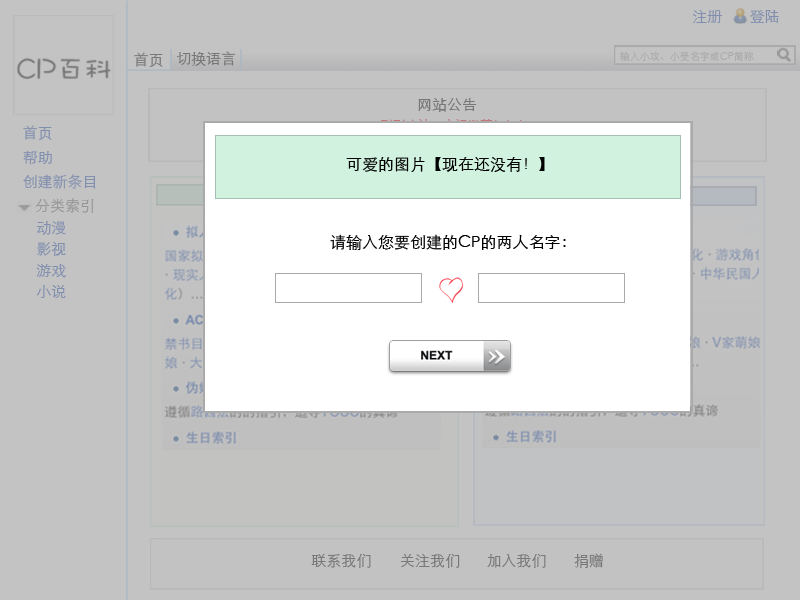
<style>
.page{position:relative;width:800px;height:600px;background:#c3c3c3}
.page>*{position:absolute;margin:0}
.t1{font:15px "STHeitiSC-Light";color:#818fae}
.t2{font:15px "STHeitiSC-Light";color:#777777}
.t3{font:10px "STHeitiSC-Light";color:#aaaaaa}
.t4{font:16px "STHeitiSC-Light";color:#000000}
.t5{font:15px "STHeitiSC-Light";color:#959595}
</style>
<div class="page">
<p class="t1" style="left:692px;top:10px;width:30px;height:13px">注册</p>
<p class="t1" style="left:750px;top:10px;width:29px;height:14px">登陆</p>
<p class="t2" style="left:134px;top:52px;width:29px;height:15px">首页</p>
<p class="t2" style="left:176px;top:51px;width:60px;height:15px">切换语言</p>
<p class="t3" style="left:619px;top:51px;width:135px;height:11px">输入小攻、小受名字或CP简称</p>
<p class="t2" style="left:418px;top:98px;width:58px;height:14px">网站公告</p>
<p class="t1" style="left:23px;top:125px;width:29px;height:15px">首页</p>
<p class="t1" style="left:23px;top:150px;width:29px;height:15px">帮助</p>
<p class="t4" style="left:346px;top:157px;width:199px;height:15px">可爱的图片【现在还没有！】</p>
<p class="t1" style="left:23px;top:174px;width:73px;height:15px">创建新条目</p>
<p class="t5" style="left:35px;top:198px;width:59px;height:15px">分类索引</p>
<p class="t1" style="left:37px;top:221px;width:29px;height:14px">动漫</p>
<p class="t1" style="left:37px;top:242px;width:29px;height:14px">影视</p>
<p class="t4" style="left:330px;top:234px;width:236px;height:16px">请输入您要创建的CP的两人名字：</p>
<p class="t1" style="left:36px;top:264px;width:30px;height:14px">游戏</p>
<p class="t1" style="left:36px;top:285px;width:30px;height:13px">小说</p>
<p class="t2" style="left:311px;top:553px;width:60px;height:15px">联系我们</p>
<p class="t2" style="left:401px;top:554px;width:59px;height:14px">关注我们</p>
<p class="t2" style="left:487px;top:554px;width:59px;height:14px">加入我们</p>
<p class="t2" style="left:574px;top:553px;width:29px;height:15px">捐赠</p>
</div>
